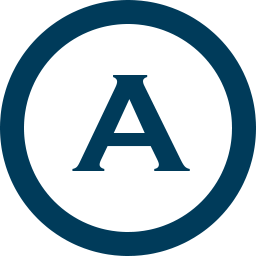
<style>
.page{position:relative;width:256px;height:256px;background:#ffffff}
.page>*{position:absolute;margin:0}
.t1{font:144px "CopperplateGothic-Bold";letter-spacing:0.05em;color:#003b5a}
</style>
<div class="page">
<p class="t1" style="left:72px;top:75px;width:118px;height:96px">A</p>
</div>
